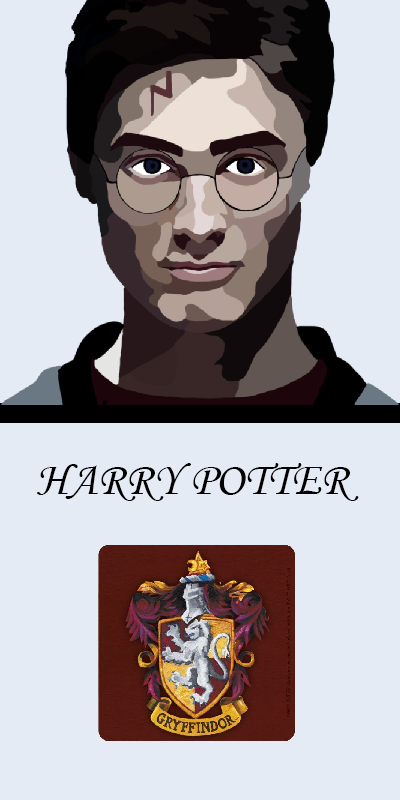
<style>
.page{position:relative;width:400px;height:800px;background:#e4ebf5}
.page>*{position:absolute;margin:0}
.t1{font:47px "MonotypeCorsiva";color:#000000}
</style>
<div class="page">
<p class="t1" style="left:37px;top:463px;width:322px;height:38px">HARRY POTTER</p>
</div>
